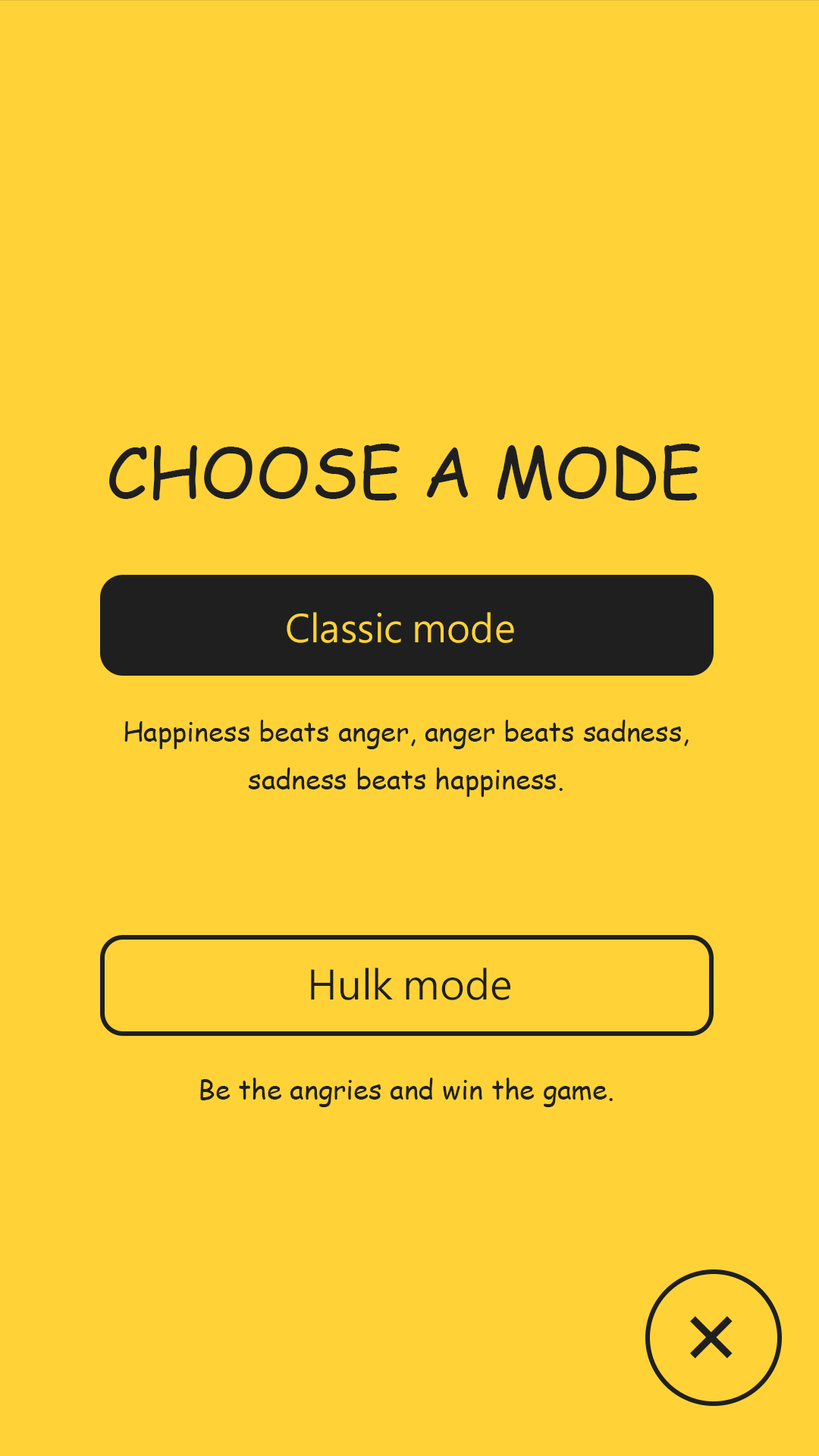
<style>
.page{position:relative;width:819px;height:1456px;background:#ffd337}
.page>*{position:absolute;margin:0}
.t1{font:69px "ComicSansMS";color:#1f1f1f}
.t2{font:37.5px "MicrosoftJhengHeiRegular";color:#ffd337}
.t3{font:27.3px "ComicSansMS";color:#1f1f1f}
.t4{font:39.6px "MicrosoftJhengHeiRegular";color:#1f1f1f}
.t5{font:106px "MicrosoftJhengHeiRegular";color:#1f1f1f}
</style>
<div class="page">
<p class="t1" style="left:109px;top:444px;width:591px;height:56px">CHOOSE A MODE</p>
<p class="t2" style="left:287px;top:612px;width:227px;height:31px">Classic mode</p>
<p class="t3" style="left:124px;top:720px;width:565px;height:77px;text-align:center">Happiness beats anger, anger beats sadness,<br>sadness beats happiness.</p>
<p class="t4" style="left:311px;top:968px;width:199px;height:32px">Hulk mode</p>
<p class="t3" style="left:200px;top:1078px;width:413px;height:29px">Be the angries and win the game.</p>
<p class="t5" style="left:690px;top:1316px;width:43px;height:43px;rotate:45deg">+</p>
</div>
